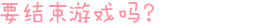
<style>
.page{position:relative;width:262px;height:24px;background:#ffffff}
.page>*{position:absolute;margin:0}
.t1{font:26px "¢è?";color:#ff93a5}
</style>
<div class="page">
<p class="t1" style="left:0px;top:1px;width:154px;height:23px">要结束游戏吗？</p>
</div>
